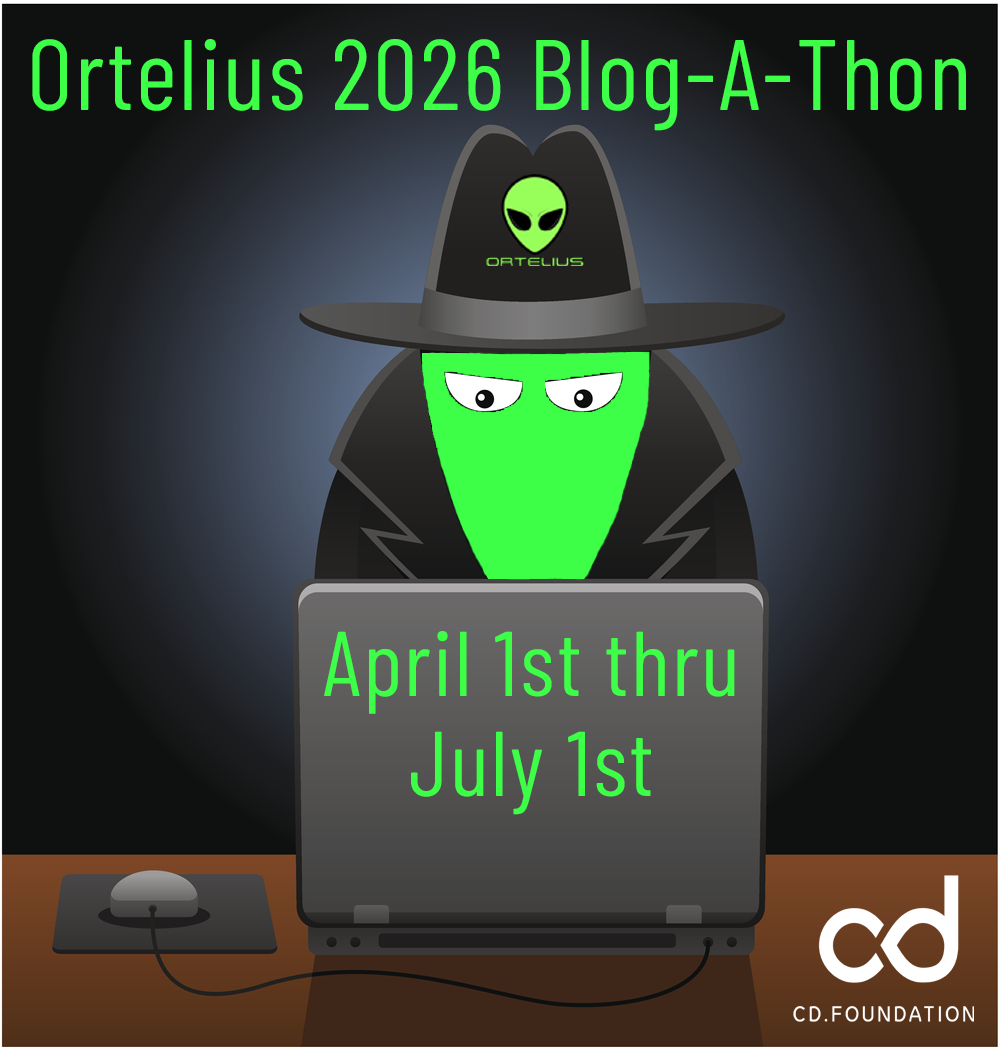
<style>
.page{position:relative;width:1000px;height:1048px}
.page>*{position:absolute;margin:0}
.t1{font:100px "BarlowCondensed-Regular";letter-spacing:0.025em;color:#3dff47}
.t2{font:91.7px/100px "BarlowCondensed-Regular";letter-spacing:0.025em;color:#3dff47}
</style>
<div class="page">
<p class="t1" style="left:32px;top:39px;width:934px;height:92px">Ortelius 2026 Blog-A-Thon</p>
<p class="t2" style="left:324px;top:631px;width:411px;height:184px;text-align:center">April 1st thru<br> July 1st</p>
</div>
